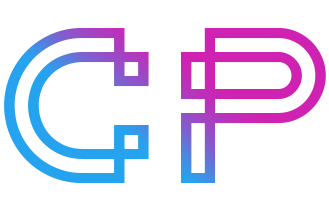
<style>
.page{position:relative;width:329px;height:200px;background:#ffffff}
.page>*{position:absolute;margin:0}
.t1{font:220.8px "RadonBold"}
</style>
<div class="page">
<p class="t1" style="left:4px;top:28px;width:322px;height:155px">CP</p>
</div>
